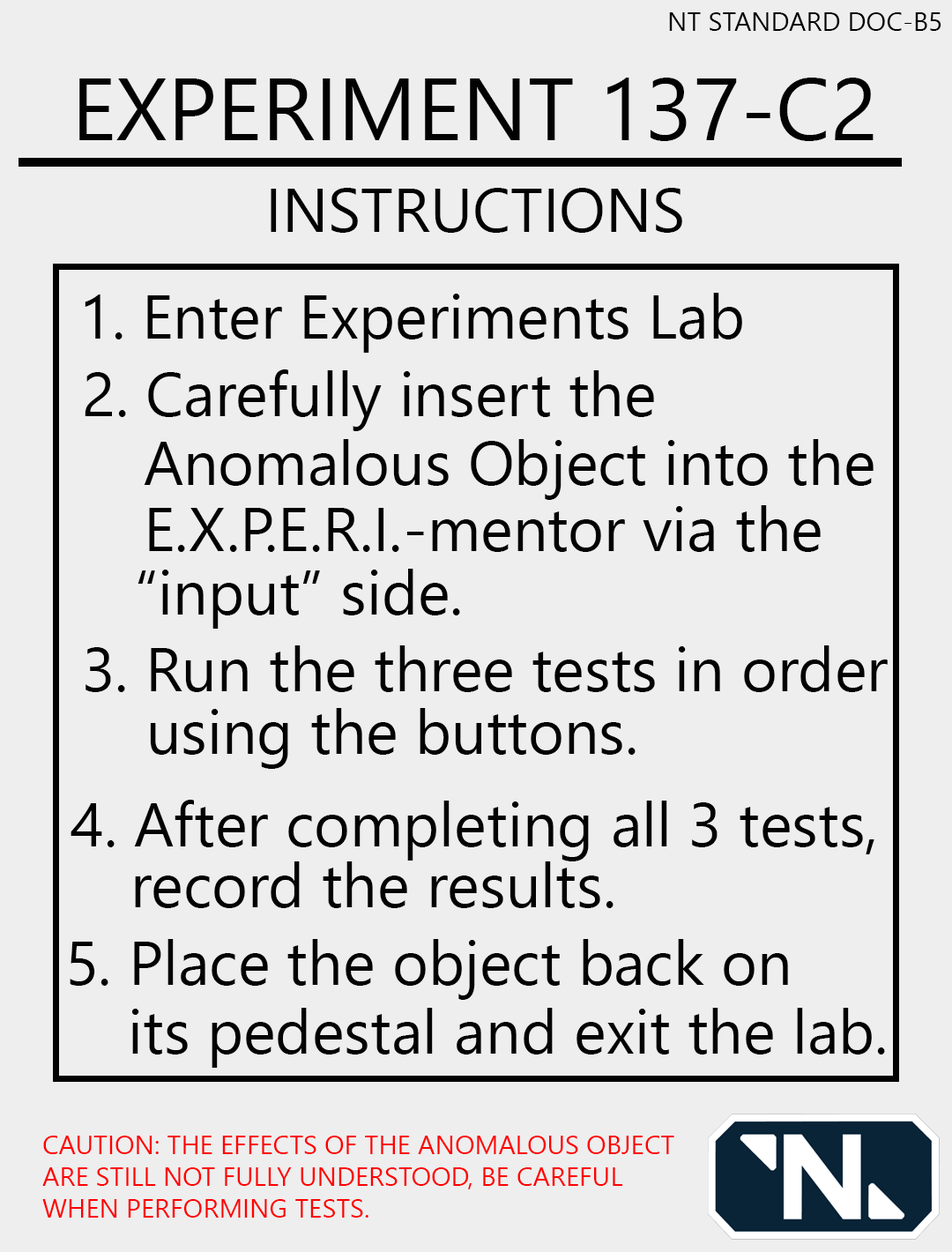
<style>
.page{position:relative;width:952px;height:1252px;background:#eeeeee}
.page>*{position:absolute;margin:0}
.t1{font:26.5px "NirmalaUI";color:#020202}
.t2{font:88.2px "NirmalaUI";color:#020202}
.t3{font:61.7px "NirmalaUI";color:#020202}
.t4{font:26.5px "NirmalaUI";color:#ff0000}
</style>
<div class="page">
<p class="t1" style="left:669px;top:12px;width:273px;height:19px">NT STANDARD DOC-B5</p>
<p class="t2" style="left:79px;top:78px;width:795px;height:63px">EXPERIMENT 137-C2</p>
<p class="t3" style="left:271px;top:188px;width:411px;height:45px">INSTRUCTIONS</p>
<p class="t3" style="left:85px;top:293px;width:657px;height:60px">1. Enter Experiments Lab</p>
<p class="t3" style="left:85px;top:369px;width:569px;height:62px">2. Carefully insert the</p>
<p class="t3" style="left:144px;top:439px;width:730px;height:61px">Anomalous Object into the</p>
<p class="t3" style="left:149px;top:505px;width:672px;height:47px">E.X.P.E.R.I.-mentor via the</p>
<p class="t3" style="left:138px;top:569px;width:322px;height:60px">“input” side.</p>
<p class="t3" style="left:86px;top:645px;width:802px;height:47px">3. Run the three tests in order</p>
<p class="t3" style="left:150px;top:708px;width:486px;height:61px">using the buttons.</p>
<p class="t3" style="left:71px;top:800px;width:804px;height:62px">4. After completing all 3 tests,</p>
<p class="t3" style="left:135px;top:862px;width:479px;height:46px">record the results.</p>
<p class="t3" style="left:70px;top:939px;width:718px;height:61px">5. Place the object back on</p>
<p class="t3" style="left:132px;top:1008px;width:753px;height:60px">its pedestal and exit the lab.</p>
<p class="t4" style="left:42px;top:1136px;width:633px;height:82px">CAUTION: THE EFFECTS OF THE ANOMALOUS OBJECT<br>ARE STILL NOT FULLY UNDERSTOOD, BE CAREFUL<br>WHEN PERFORMING TESTS.</p>
</div>
